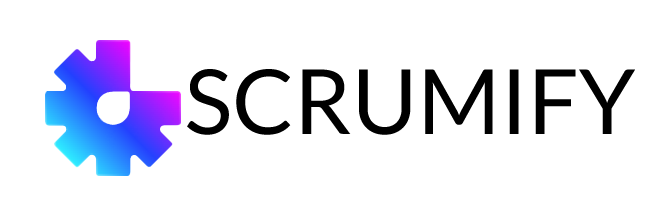
<style>
.page{position:relative;width:662px;height:203px;background:#ffffff}
.page>*{position:absolute;margin:0}
.t1{font:90px "Lato-Regular";color:#000000;text-transform:uppercase}
</style>
<div class="page">
<p class="t1" style="left:187px;top:69px;width:448px;height:66px">SCRUMIfy</p>
</div>
